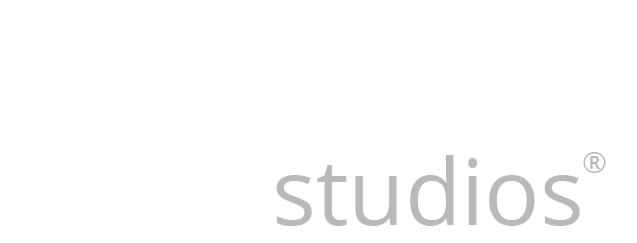
<style>
.page{position:relative;width:637px;height:243px;background:#ffffff}
.page>*{position:absolute;margin:0}
.t1{font:92px "OpenSans-Regular";color:#b9b9b9}
.t2{font:30px "OpenSans-Regular";color:#bab6b6}
</style>
<div class="page">
<p class="t1" style="left:276px;top:155px;width:304px;height:71px">studios</p>
<p class="t2" style="left:583px;top:152px;width:23px;height:21px">®</p>
</div>
